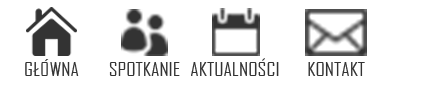
<style>
.page{position:relative;width:425px;height:99px;background:#ffffff}
.page>*{position:absolute;margin:0}
.t1{font:18px "AgencyFB-Reg";color:#333333;scale:1.17 1}
</style>
<div class="page">
<p class="t1" style="left:25px;top:59px;width:54px;height:17px">GŁÓWNA</p>
<p class="t1" style="left:109px;top:62px;width:71px;height:14px">SPOTKANIE</p>
<p class="t1" style="left:191px;top:62px;width:88px;height:14px">AKTUALNOSCI</p>
<p class="t1" style="left:308px;top:62px;width:57px;height:14px">KONTAKT</p>
</div>
